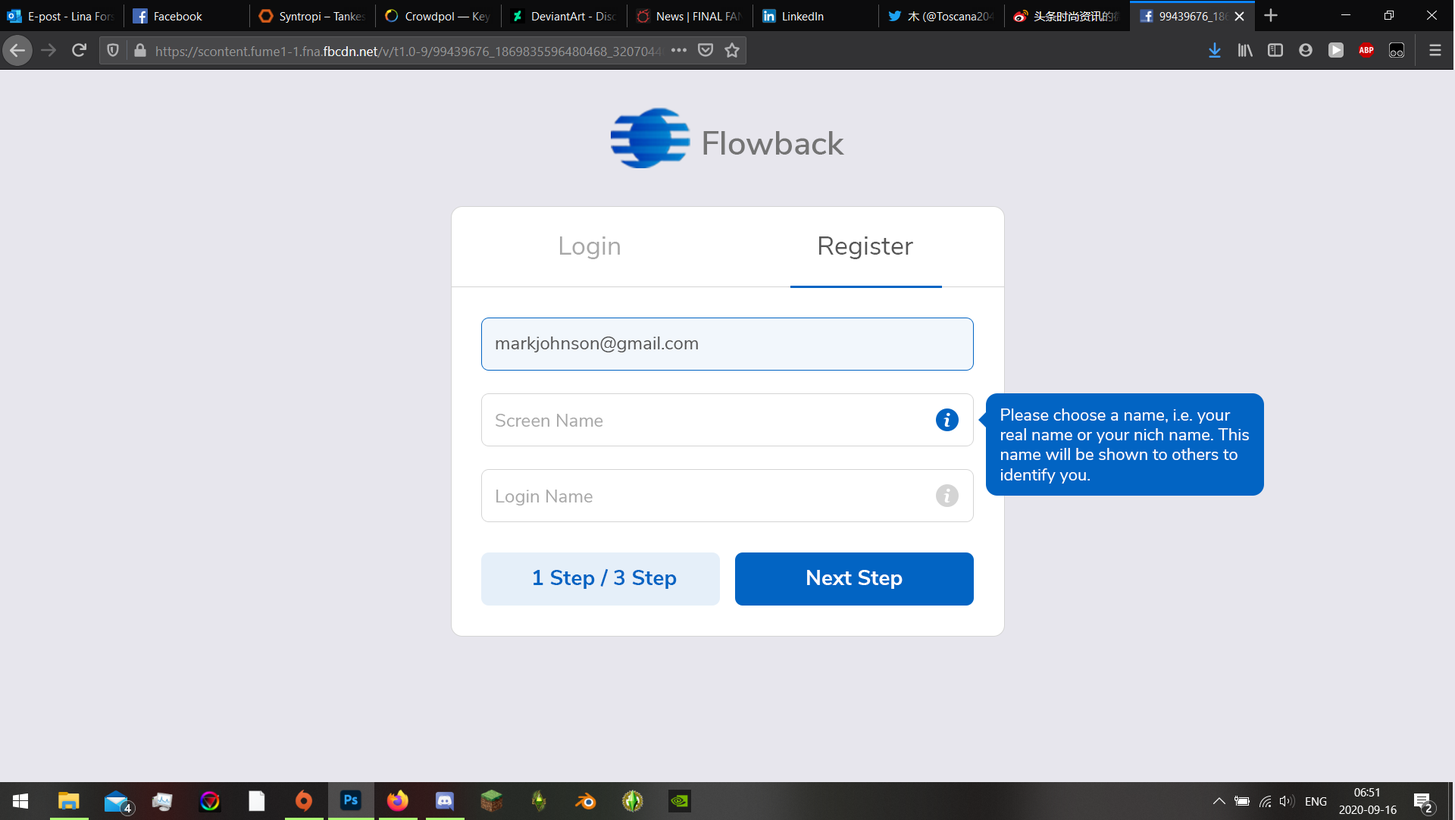
<style>
.page{position:relative;width:1455px;height:820px;background:#e7e6ed}
.page>*{position:absolute;margin:0}
.t1{font:33.2px "NunitoSans-SemiBold";color:#747474}
.t2{font:25.8px "NunitoSans-Regular";color:#a8a8a8}
.t3{font:25.8px "NunitoSans-Regular";color:#575757}
.t4{font:18.2px "NunitoSans-Regular";color:#575757}
.t5{font:18.2px "NunitoSans-Regular";color:#a8a8a8}
.t6{font:16.7px "NunitoSans-Regular";color:#ffffff}
.t7{font:21.2px "NunitoSans-Bold";color:#0264c3}
.t8{font:21.2px "NunitoSans-Bold";color:#ffffff}
</style>
<div class="page">
<p class="t1" style="left:703px;top:131px;width:142px;height:24px">Flowback</p>
<p class="t2" style="left:560px;top:236px;width:60px;height:23px">Login</p>
<p class="t3" style="left:819px;top:236px;width:94px;height:23px">Register</p>
<p class="t4" style="left:495px;top:336px;width:203px;height:16px">markjohnson@gmail.com</p>
<p class="t5" style="left:495px;top:414px;width:108px;height:13px">Screen Name</p>
<p class="t6" style="left:1000px;top:408px;width:249px;height:75px">Please choose a name, i.e. your<br>real name or your nich name. This<br>name will be shown to others to<br>identify you.</p>
<p class="t5" style="left:496px;top:489px;width:96px;height:16px">Login Name</p>
<p class="t7" style="left:533px;top:568px;width:144px;height:21px">1 Step / 3 Step</p>
<p class="t8" style="left:807px;top:570px;width:95px;height:19px">Next Step</p>
</div>
